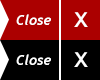
<style>
.page{position:relative;width:100px;height:80px;background:#ab0000}
.page>*{position:absolute;margin:0}
.t1{font:14px "Trebuchet-BoldItalic";color:#ffffff}
.t2{font:28px "TrebuchetMS";color:#ffffff}
</style>
<div class="page">
<p class="t1" style="left:16px;top:14px;width:35px;height:11px">Close</p>
<p class="t2" style="left:74px;top:12px;width:14px;height:15px">x</p>
<p class="t1" style="left:16px;top:54px;width:35px;height:11px">Close</p>
<p class="t2" style="left:74px;top:52px;width:14px;height:15px">x</p>
</div>
